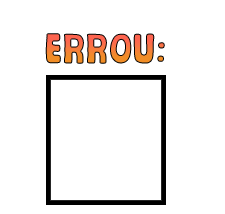
<style>
.page{position:relative;width:225px;height:214px;background:#ffffff}
.page>*{position:absolute;margin:0}
.t1{font:40px "Chatlong"}
</style>
<div class="page">
<p class="t1" style="left:45px;top:33px;width:120px;height:31px">errou:</p>
</div>
